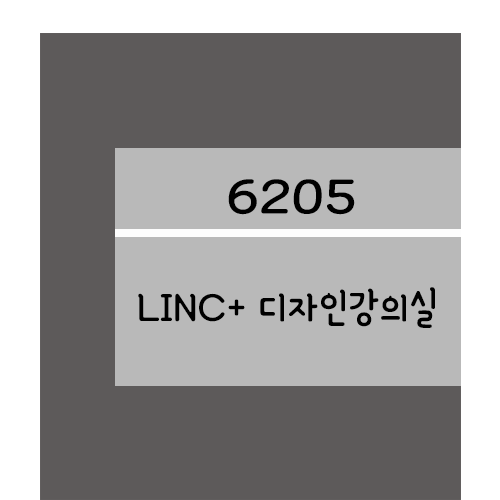
<style>
.page{position:relative;width:500px;height:500px;background:#5d5a5a}
.page>*{position:absolute;margin:0}
.t1{font:61.2px "YanoljaYacheR";color:#000000;scale:1.18 1}
.t2{font:48px "YanoljaYacheR";color:#000000}
</style>
<div class="page">
<p class="t1" style="left:228px;top:179px;width:127px;height:36px">6205</p>
<p class="t2" style="left:138px;top:287px;width:297px;height:41px">LINC+ 디자인강의실</p>
</div>
